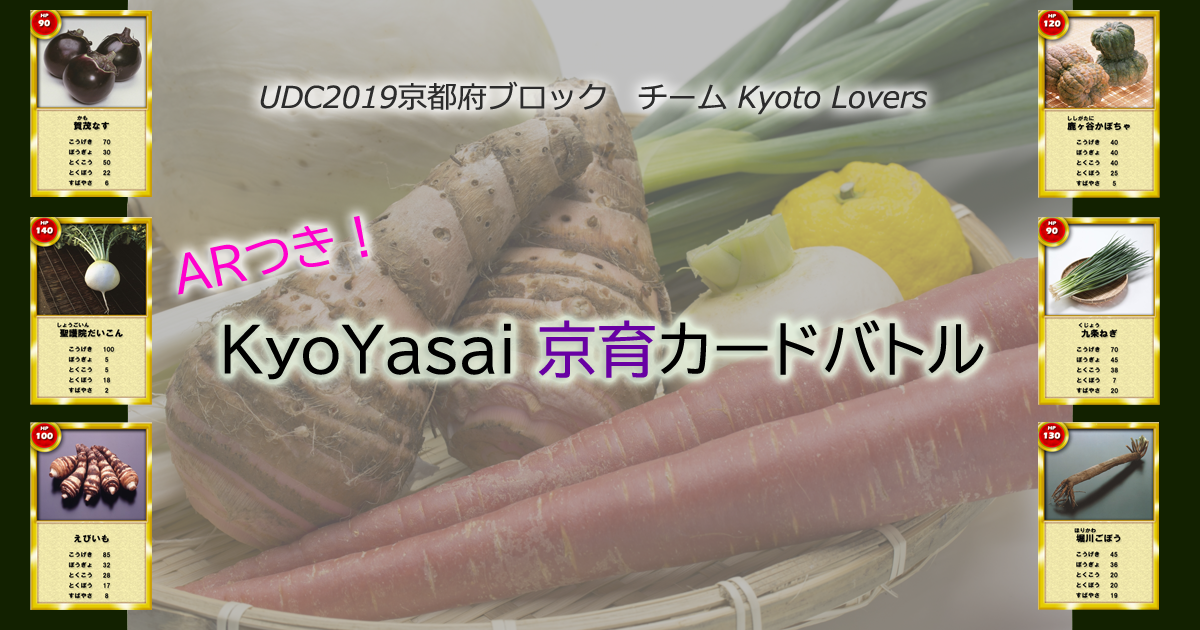
<style>
.page{position:relative;width:1200px;height:630px}
.page>*{position:absolute;margin:0}
.t1{font:30px "Meiryo-Italic";color:#2c2c2c}
.t2{font:48px "BIZ-UDPGothic";color:#ff00cc}
.t3{font:60px "BIZ-UDPGothic";color:#000000}
.t4{font:60px "BIZ-UDPGothic";color:#6800a3}
</style>
<div class="page">
<p class="t1" style="left:260px;top:81px;width:667px;height:34px">UDC2019京都府ブロック　チーム Kyoto Lovers</p>
<p class="t2" style="left:178px;top:216px;width:190px;height:79px;rotate:-12deg">ARつき！</p>
<p class="t3" style="left:224px;top:320px;width:760px;height:60px">ＫｙｏＹａｓａｉ <span class="t4">京育</span>カードバトル</p>
</div>
